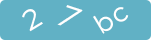
<style>
.page{position:relative;width:151px;height:40px;background:#61b1c5}
.page>*{position:absolute;margin:0}
.t1{font:31.1px "Acrom-Regular";color:#ffffff;text-transform:uppercase;scale:1.13 1}
.t2{font:28px "Acrom-Regular";color:#ffffff;text-transform:uppercase}
.t3{font:28px "Acrom-Regular";color:#ffffff}
</style>
<div class="page">
<p class="t1" style="left:57px;top:5px;width:26px;height:21px;rotate:18deg">7</p>
<p class="t2" style="left:22px;top:9px;width:21px;height:23px;rotate:-31deg">2</p>
<p class="t3" style="left:93px;top:7px;width:36px;height:27px;rotate:-31deg">bc</p>
</div>
